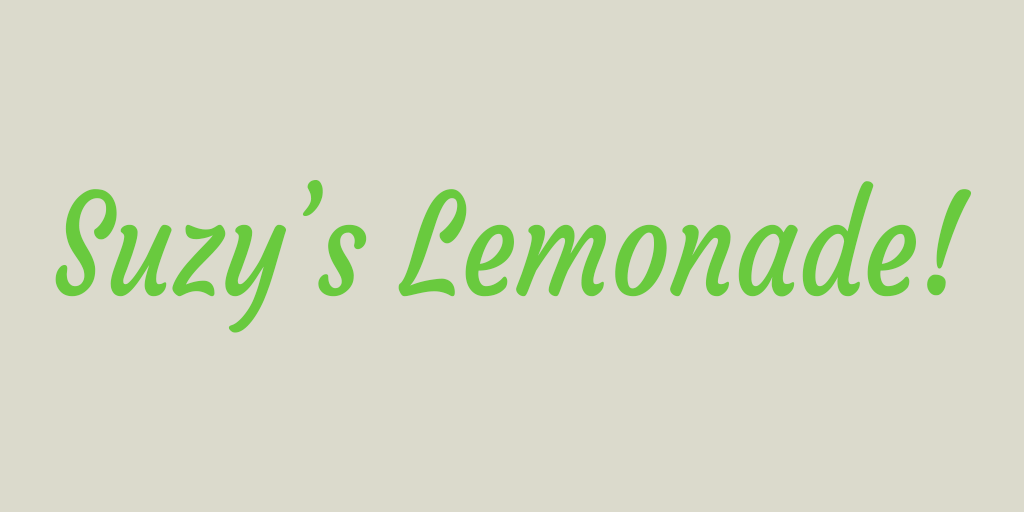
<style>
.page{position:relative;width:1024px;height:512px;background:#dbdacc}
.page>*{position:absolute;margin:0}
.t1{font:137.8px "Courgette-Regular";color:#69ca3e;scale:0.84 1}
</style>
<div class="page">
<p class="t1" style="left:55px;top:180px;width:917px;height:153px">Suzy’s Lemonade!</p>
</div>
